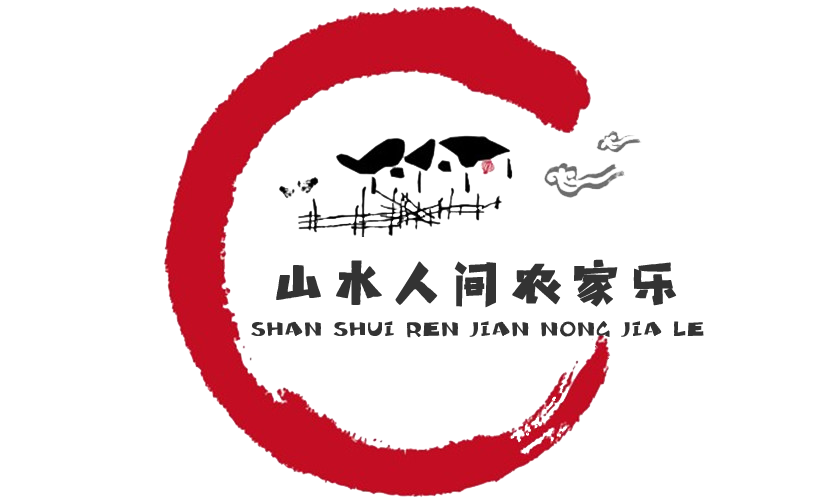
<style>
.page{position:relative;width:825px;height:500px;background:#ffffff}
.page>*{position:absolute;margin:0}
.t1{font:57.7px "ShanghaiFace-Zen-ExtraBoldGB2.0";color:#333333;font-weight:bold}
.t2{font:19.2px "ShanghaiFace-Zen-ExtraBoldGB2.0";color:#333333;font-weight:bold}
</style>
<div class="page">
<p class="t1" style="left:276px;top:259px;width:401px;height:49px">山水人间农家乐</p>
<p class="t2" style="left:251px;top:321px;width:453px;height:17px">SHAN SHUI REN JIAN NONG JIA LE</p>
</div>
